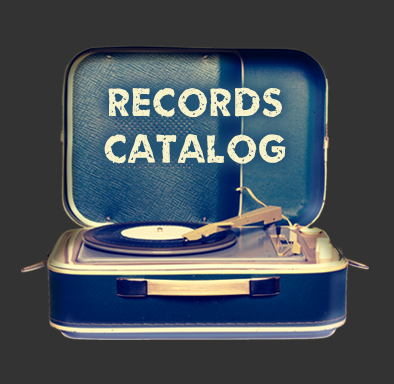
<style>
.page{position:relative;width:394px;height:384px;background:#333333}
.page>*{position:absolute;margin:0}
.t1{font:44.2px/46.7px "Umbrage";letter-spacing:0.056em;color:#f7f2c9}
</style>
<div class="page">
<p class="t1" style="left:104px;top:87px;width:182px;height:77px;text-align:center">RECORDS<br>CATALOG</p>
</div>
